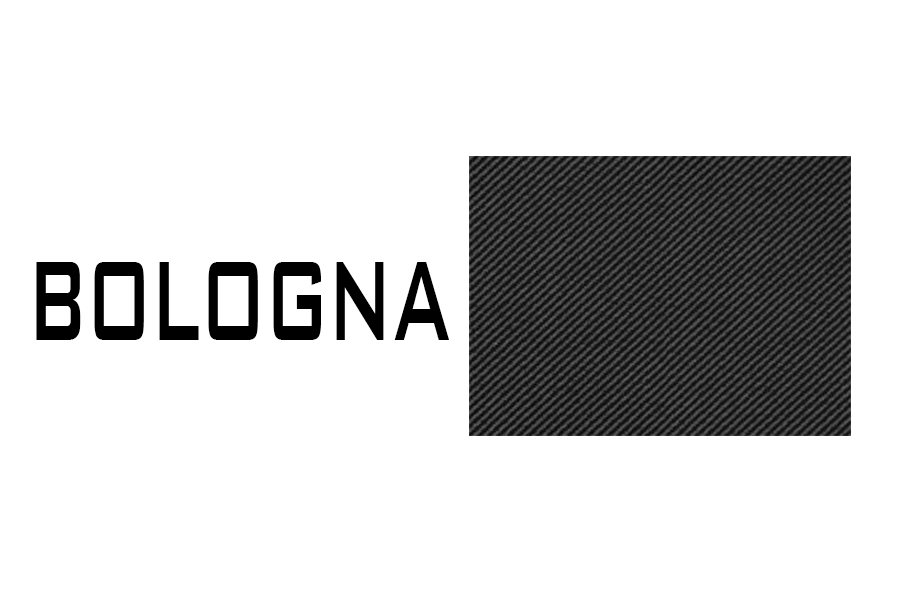
<style>
.page{position:relative;width:900px;height:600px;background:#ffffff}
.page>*{position:absolute;margin:0}
.t1{font:183.9px "BankGothicBT-Medium";color:#000000;scale:0.49 1}
</style>
<div class="page">
<p class="t1" style="left:36px;top:262px;width:413px;height:78px">bologna</p>
</div>
